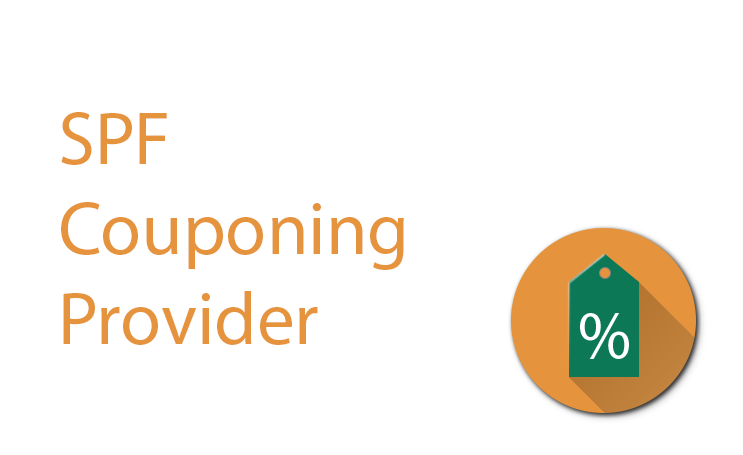
<style>
.page{position:relative;width:743px;height:455px;background:#ffffff}
.page>*{position:absolute;margin:0}
.t1{font:75px "MyriadPro-Regular";color:#e5943d}
</style>
<div class="page">
<p class="t1" style="left:61px;top:112px;width:343px;height:233px">SPF<br>Couponing<br>Provider</p>
</div>
